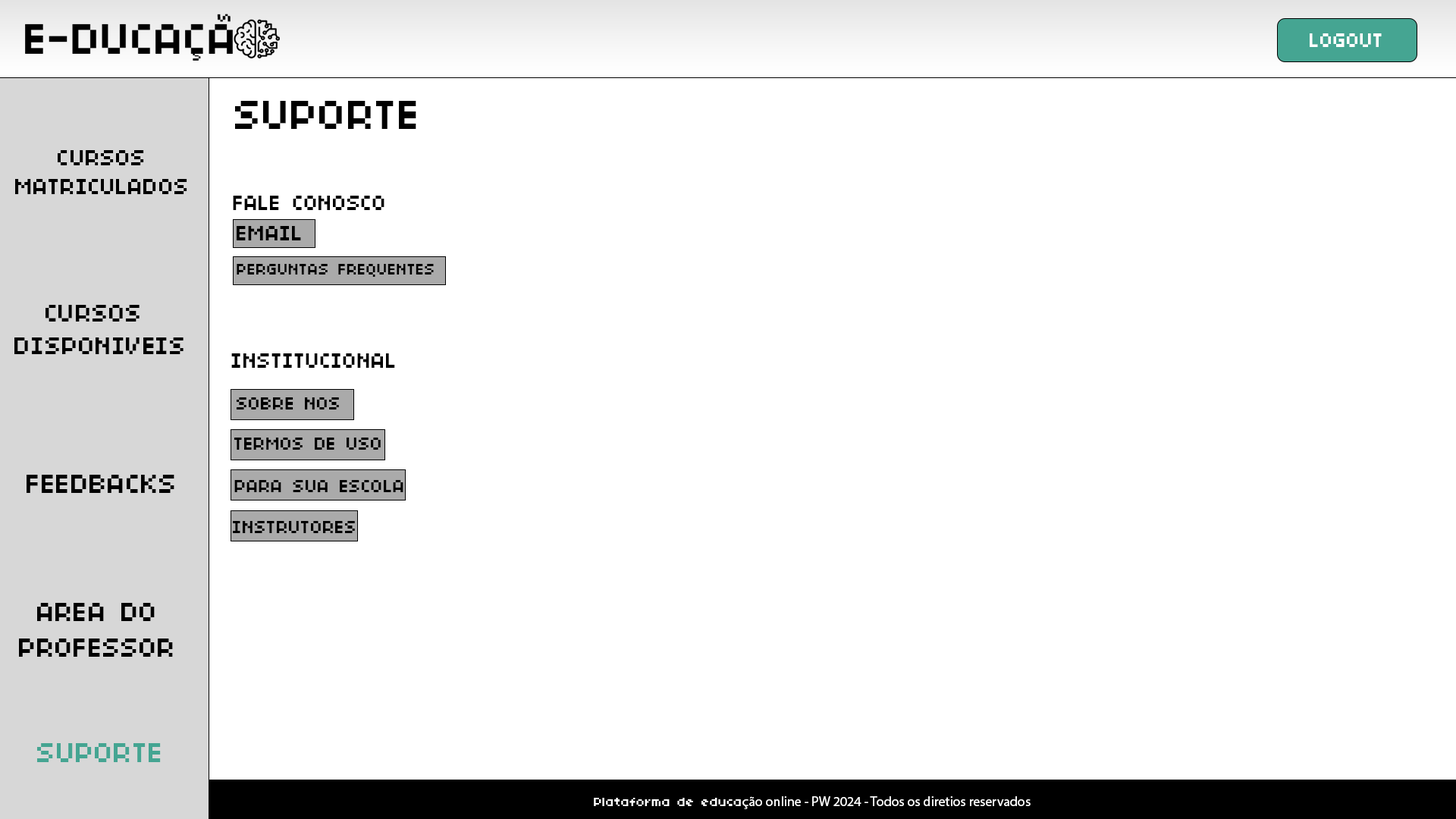
<style>
.page{position:relative;width:1456px;height:819px;background:#ffffff}
.page>*{position:absolute;margin:0}
.t1{font:21.3px "04b03";color:#ffffff}
.t2{font:45.2px "04b03";color:#000000}
.t3{font:24.5px "04b03";color:#000000}
.t4{font:22.8px "04b03";color:#000000}
.t5{font:23.4px "04b03";color:#000000}
.t6{font:17.3px "04b03";color:#000000}
.t7{font:27px "04b03";color:#000000}
.t8{font:19.5px "04b03";color:#000000}
.t9{font:29.5px "04b03";color:#000000}
.t10{font:29.3px "04b03";color:#000000}
.t11{font:30.7px "04b03";color:#45a592}
.t12{font:13.6px "MyriadPro-Regular";color:#ffffff}
.t13{font:13.6px "04b03";color:#ffffff}
</style>
<div class="page">
<p class="t1" style="left:1310px;top:33px;width:72px;height:14px">LOGOUT</p>
<p class="t2" style="left:235px;top:101px;width:181px;height:28px">SUPORTE</p>
<p class="t3" style="left:15px;top:150px;width:172px;height:44px;text-align:center">CURSOS<br>MATRICULADOS</p>
<p class="t4" style="left:233px;top:196px;width:151px;height:14px">FALE CONOSCO</p>
<p class="t5" style="left:237px;top:226px;width:64px;height:14px">EMAIL</p>
<p class="t6" style="left:237px;top:264px;width:197px;height:13px">PERGUNTAS FREQUENTES</p>
<p class="t7" style="left:14px;top:305px;width:170px;height:49px;text-align:center">CURSOS <br>DISPONIVEIS</p>
<p class="t4" style="left:231px;top:353px;width:164px;height:15px">INSTITUCIONAL</p>
<p class="t8" style="left:237px;top:397px;width:102px;height:12px">SOBRE NOS</p>
<p class="t8" style="left:234px;top:438px;width:147px;height:12px">TERMOS DE USO</p>
<p class="t9" style="left:27px;top:475px;width:147px;height:18px">FEEDBACKS</p>
<p class="t8" style="left:234px;top:480px;width:169px;height:12px">PARA SUA ESCOLA</p>
<p class="t8" style="left:233px;top:521px;width:122px;height:12px">INSTRUTORES</p>
<p class="t10" style="left:19px;top:603px;width:154px;height:54px;text-align:center">AREA DO<br>PROFESSOR</p>
<p class="t11" style="left:37px;top:743px;width:124px;height:19px">SUPORTE</p>
<p class="t12" style="left:594px;top:796px;width:437px;height:13px"><span class="t13">Plataforma de educa</span>ção online - PW 2024 - Todos os diretios reservados</p>
</div>
